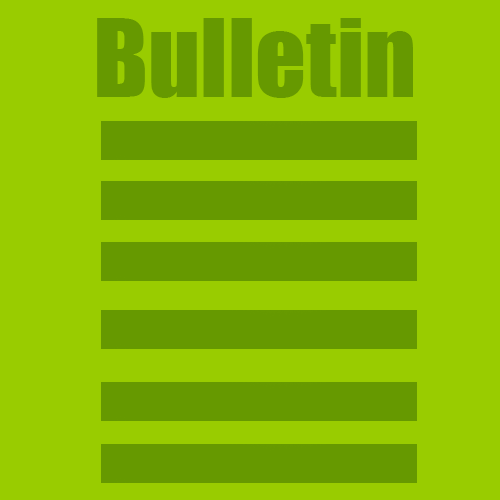
<style>
.page{position:relative;width:500px;height:500px;background:#99cc00}
.page>*{position:absolute;margin:0}
.t1{font:100px "Impact";color:#669900}
</style>
<div class="page">
<p class="t1" style="left:97px;top:18px;width:316px;height:80px">Bulletin</p>
</div>
